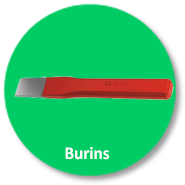
<style>
.page{position:relative;width:185px;height:185px;background:#00cc66}
.page>*{position:absolute;margin:0}
.t1{font:18px "Calibri-Bold";color:#ffffff;scale:0.95 1}
</style>
<div class="page">
<p class="t1" style="left:65px;top:147px;width:44px;height:13px">Burins</p>
</div>
